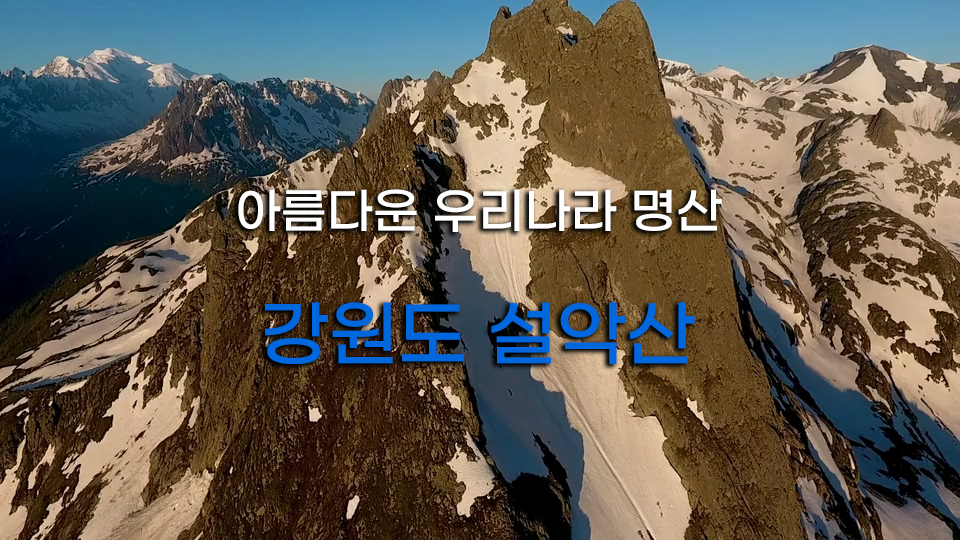
<style>
.page{position:relative;width:960px;height:540px}
.page>*{position:absolute;margin:0}
.t1{font:47.9px "GmarketSansTTFMedium";color:#ffffff}
.t2{font:72px "GmarketSansTTFMedium";color:#0068dc}
</style>
<div class="page">
<p class="t1" style="left:238px;top:189px;width:484px;height:43px">아름다운 우리나라 명산</p>
<p class="t2" style="left:265px;top:302px;width:430px;height:62px">강원도 설악산</p>
</div>
